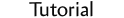
<style>
.page{position:relative;width:124px;height:18px;background:#ffffff}
.page>*{position:absolute;margin:0}
.t1{font:20px "Amira-Roman";color:#000000}
</style>
<div class="page">
<p class="t1" style="left:29px;top:1px;width:64px;height:16px;opacity:0.96">Tutorial</p>
</div>
